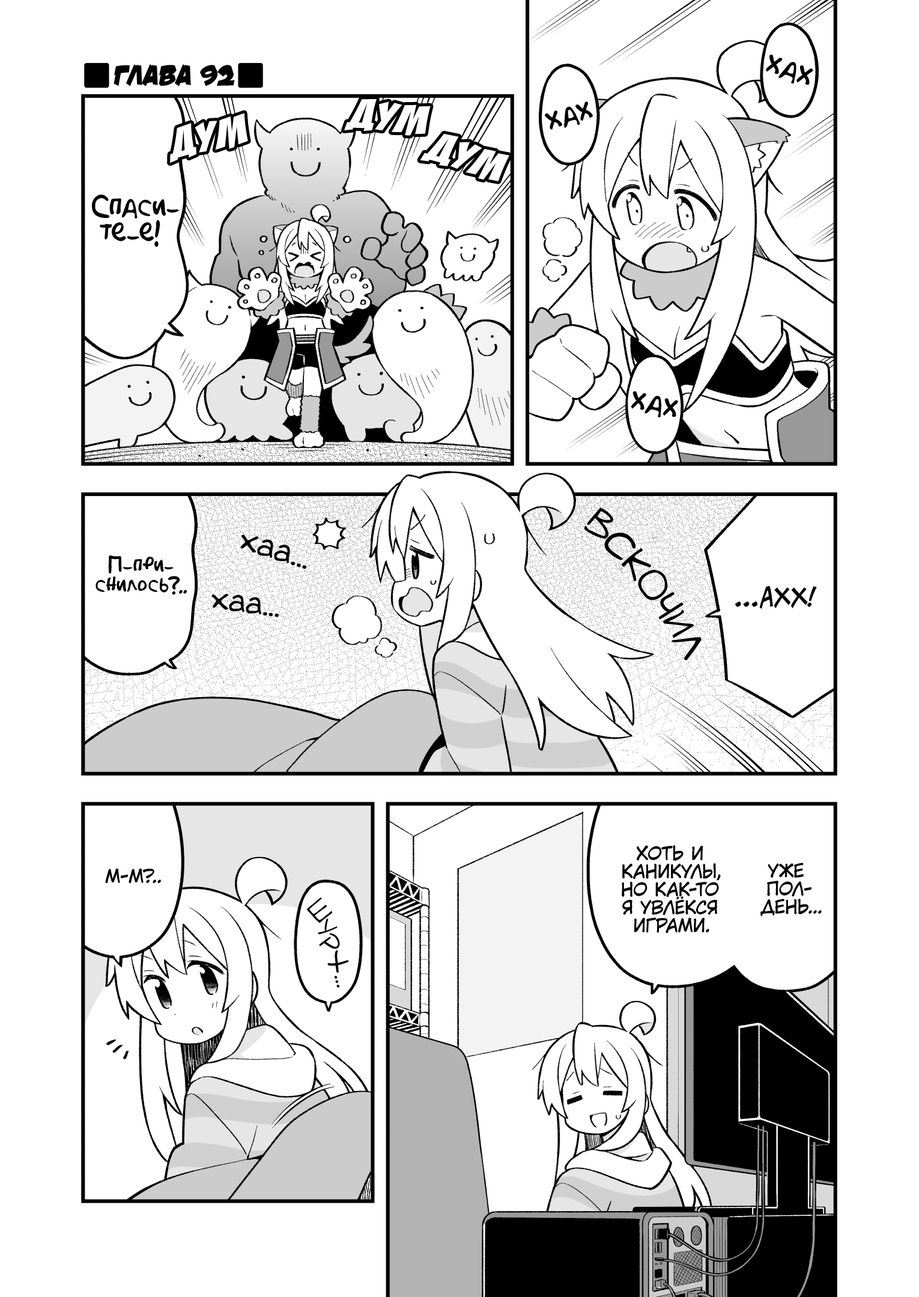
<style>
.page{position:relative;width:919px;height:1297px;background:#ffffff}
.page>*{position:absolute;margin:0}
.t1{font:28.8px "v_DamnNoisyKids";color:#000000;text-transform:uppercase}
.t2{font:28.8px "AkbarPlain";color:#000000}
.t3{font:45.1px "BadaBoom";color:#ffffff;scale:1.2 1}
.t4{font:28.2px "AkbarPlain";color:#000000}
.t5{font:27px "AkbarPlain";color:#000000}
.t6{font:36px "v_Augie";color:#000000;text-transform:uppercase;scale:0.9 1}
.t7{font:33.6px "v_Augie";color:#000000}
.t8{font:19.8px "AkbarPlain";color:#000000}
.t9{font:25.2px "v_CCJeffCampbell";color:#000000;text-transform:uppercase}
.t10{font:32.4px "v_Augie";color:#000000}
.t11{font:18px "KuraiVoice2";color:#000000;text-transform:uppercase}
.t12{font:25.2px "v_Augie";color:#000000;text-transform:uppercase;scale:0.9 1}
</style>
<div class="page">
<p class="t1" style="left:114px;top:64px;width:121px;height:22px">Глава 92</p>
<p class="t2" style="left:766px;top:55px;width:47px;height:30px;rotate:20deg">хах</p>
<p class="t3" style="left:344px;top:99px;width:87px;height:37px;rotate:7deg">дум</p>
<p class="t4" style="left:545px;top:102px;width:48px;height:28px;rotate:-16deg">хах</p>
<p class="t3" style="left:170px;top:113px;width:78px;height:50px;rotate:-11deg">дум</p>
<p class="t3" style="left:420px;top:133px;width:89px;height:48px;rotate:19deg">дум</p>
<p class="t5" style="left:92px;top:195px;width:88px;height:52px;text-align:center">Спаси-<br>те-е!</p>
<p class="t2" style="left:631px;top:391px;width:47px;height:26px;rotate:13deg">хах</p>
<p class="t6" style="left:584px;top:508px;width:118px;height:153px;rotate:54deg">вскочил</p>
<p class="t7" style="left:240px;top:535px;width:67px;height:34px;rotate:17deg">хаа...</p>
<p class="t8" style="left:96px;top:556px;width:91px;height:39px;text-align:center">П-при-<br>снилось?..</p>
<p class="t9" style="left:735px;top:586px;width:82px;height:23px">...Ахх!</p>
<p class="t10" style="left:211px;top:594px;width:68px;height:24px;rotate:8deg">хаа...</p>
<p class="t11" style="left:622px;top:845px;width:99px;height:88px;text-align:center">Хоть и<br>каникулы,<br>но как-то<br>я увлёкся<br>играми.</p>
<p class="t11" style="left:105px;top:869px;width:56px;height:15px">М-м?..</p>
<p class="t11" style="left:760px;top:863px;width:62px;height:54px;text-align:center">Уже<br>пол-<br>день...</p>
<p class="t12" style="left:306px;top:897px;width:43px;height:91px;rotate:53deg">шурх...</p>
</div>
